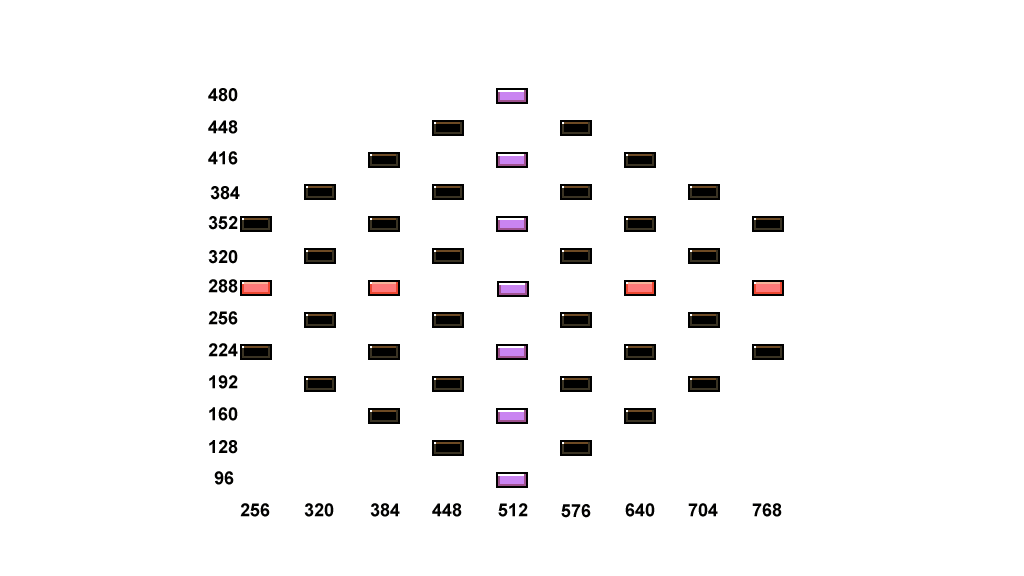
<style>
.page{position:relative;width:1024px;height:576px;background:#ffffff}
.page>*{position:absolute;margin:0}
.t1{font:18px "Arial-BoldMT";color:#010100}
</style>
<div class="page">
<p class="t1" style="left:208px;top:88px;width:30px;height:14px">480</p>
<p class="t1" style="left:208px;top:120px;width:30px;height:14px">448</p>
<p class="t1" style="left:208px;top:151px;width:30px;height:14px">416</p>
<p class="t1" style="left:210px;top:186px;width:30px;height:14px">384</p>
<p class="t1" style="left:208px;top:216px;width:30px;height:14px">352</p>
<p class="t1" style="left:208px;top:250px;width:30px;height:14px">320</p>
<p class="t1" style="left:208px;top:279px;width:30px;height:14px">288</p>
<p class="t1" style="left:208px;top:311px;width:30px;height:14px">256</p>
<p class="t1" style="left:208px;top:343px;width:30px;height:14px">224</p>
<p class="t1" style="left:209px;top:375px;width:29px;height:14px">192</p>
<p class="t1" style="left:209px;top:407px;width:29px;height:14px">160</p>
<p class="t1" style="left:209px;top:440px;width:29px;height:14px">128</p>
<p class="t1" style="left:214px;top:471px;width:20px;height:14px">96</p>
<p class="t1" style="left:240px;top:503px;width:30px;height:14px">256</p>
<p class="t1" style="left:304px;top:503px;width:30px;height:14px">320</p>
<p class="t1" style="left:370px;top:503px;width:30px;height:14px">384</p>
<p class="t1" style="left:432px;top:503px;width:30px;height:14px">448</p>
<p class="t1" style="left:498px;top:503px;width:30px;height:14px">512</p>
<p class="t1" style="left:561px;top:504px;width:30px;height:14px">576</p>
<p class="t1" style="left:625px;top:503px;width:30px;height:14px">640</p>
<p class="t1" style="left:688px;top:503px;width:30px;height:14px">704</p>
<p class="t1" style="left:752px;top:503px;width:30px;height:14px">768</p>
</div>
